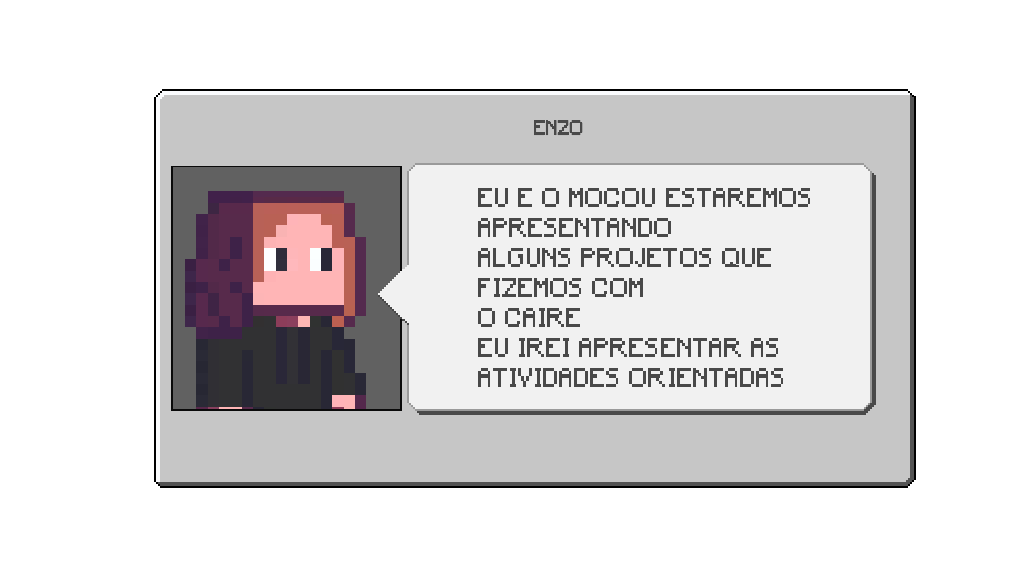
<style>
.page{position:relative;width:1024px;height:576px;background:#ffffff}
.page>*{position:absolute;margin:0}
.t1{font:19.6px "Minecraft";letter-spacing:0.02em;color:#494949;text-transform:uppercase;scale:0.86 1}
.t2{font:25.2px/30px "Minecraft";letter-spacing:0.05em;color:#494949;text-transform:uppercase;scale:0.86 1}
</style>
<div class="page">
<p class="t1" style="left:534px;top:120px;width:49px;height:16px">ENZO</p>
<p class="t2" style="left:478px;top:188px;width:332px;height:199px">Eu e o mocou estaremos <br>apresentando<br>alguns projetos que <br>fizemos com<br>o caire<br>eu irei apresentar as <br>atividades orientadas</p>
</div>
